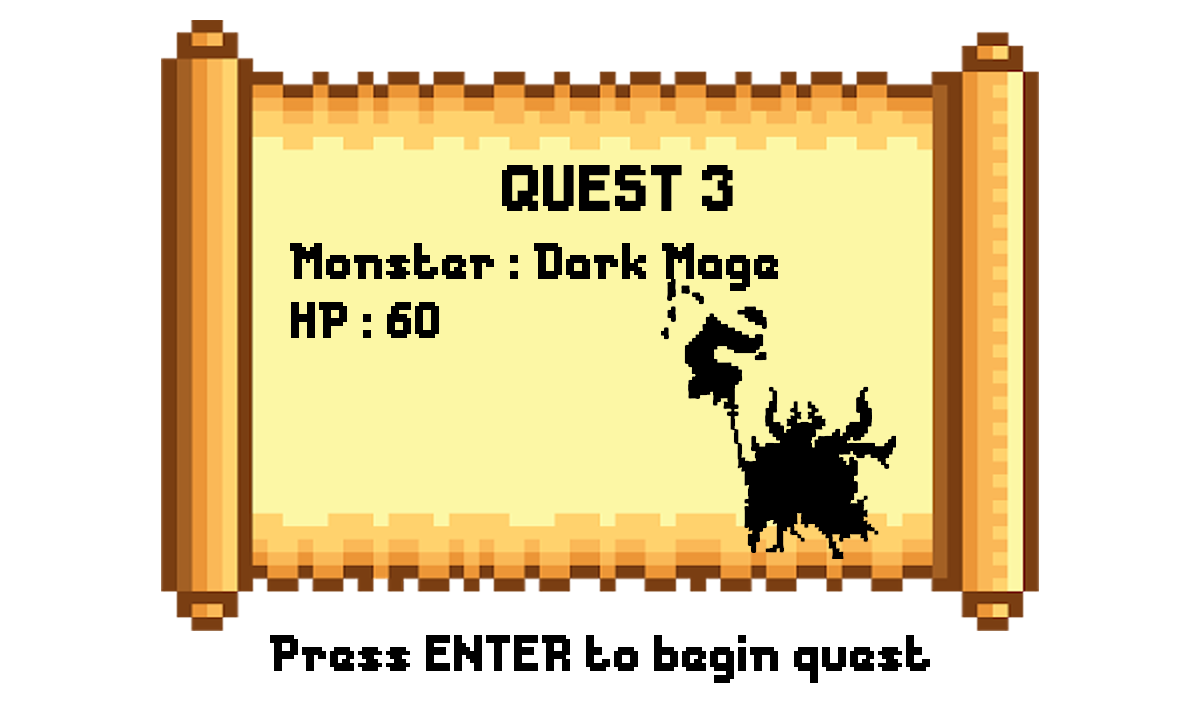
<style>
.page{position:relative;width:1200px;height:720px;background:#ffffff}
.page>*{position:absolute;margin:0}
.t1{font:61.3px "Messe-Duesseldorf";color:#000000}
.t2{font:48px "Messe-Duesseldorf";color:#000000}
</style>
<div class="page">
<p class="t1" style="left:502px;top:165px;width:231px;height:46px">QUEST 3</p>
<p class="t2" style="left:290px;top:243px;width:488px;height:48px">Monster : Dark Mage</p>
<p class="t2" style="left:291px;top:302px;width:148px;height:36px">HP : 60</p>
<p class="t2" style="left:270px;top:635px;width:660px;height:48px">Press ENTER to begin quest</p>
</div>
